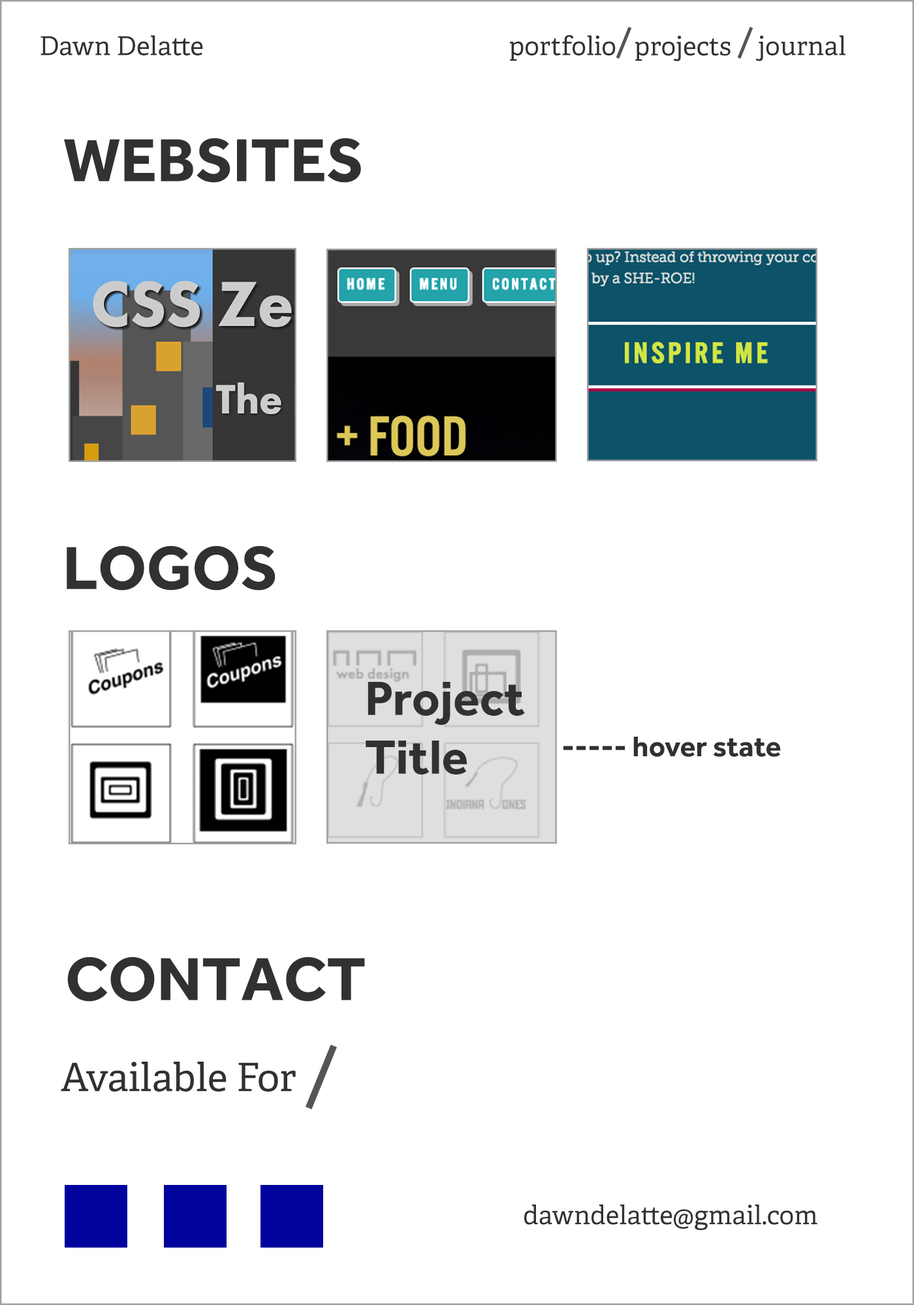
<style>
.page{position:relative;width:914px;height:1305px;background:#ffffff}
.page>*{position:absolute;margin:0}
.t1{font:26.1px "Adelle-Regular";color:#323131}
.t2{font:63px "Effra-Bold";color:#323131}
.t3{font:49.6px/58.7px "Effra-Bold";color:#323131}
.t4{font:29.4px/58.7px "Effra-Bold";color:#323131}
.t5{font:39.2px "Adelle-Regular";color:#323131}
</style>
<div class="page">
<p class="t1" style="left:40px;top:35px;width:163px;height:20px">Dawn Delatte</p>
<p class="t1" style="left:509px;top:35px;width:106px;height:26px">portfolio</p>
<p class="t1" style="left:634px;top:35px;width:96px;height:26px">projects</p>
<p class="t1" style="left:755px;top:35px;width:90px;height:26px">journal</p>
<p class="t2" style="left:64px;top:138px;width:297px;height:45px">WEBSITES</p>
<p class="t2" style="left:67px;top:546px;width:208px;height:45px">LOGOS</p>
<p class="t3" style="left:365px;top:682px;width:160px;height:93px">Project Title</p>
<p class="t4" style="left:563px;top:737px;width:217px;height:20px">----- hover state<br>        options</p>
<p class="t2" style="left:67px;top:957px;width:298px;height:45px">CONTACT</p>
<p class="t5" style="left:61px;top:1062px;width:235px;height:30px">Available For</p>
<p class="t1" style="left:524px;top:1205px;width:293px;height:26px">dawndelatte@gmail.com</p>
</div>
